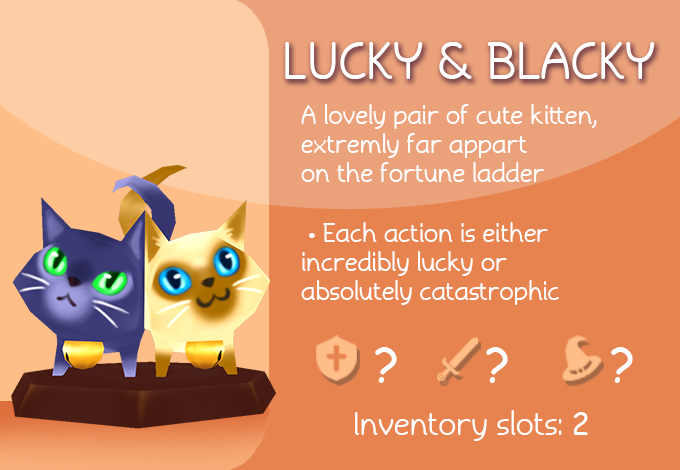
<style>
.page{position:relative;width:680px;height:470px;background:#e6834f}
.page>*{position:absolute;margin:0}
.t1{font:48px "Torid";color:#ffffff}
.t2{font:24px "Torid";color:#ffffff}
.t3{font:48px "ComicSansMS";color:#ffffff}
.t4{font:30px "Torid";color:#ffffff}
.t5{font:30px "ComicSansMS";color:#ffffff}
</style>
<div class="page">
<p class="t1" style="left:285px;top:42px;width:369px;height:37px">LUCKY &amp; BLACKY</p>
<p class="t2" style="left:301px;top:104px;width:296px;height:78px">A lovely pair of cute kitten, <br>extremly far appart <br>on the fortune ladder</p>
<p class="t2" style="left:301px;top:222px;width:258px;height:83px">• Each action is either <br>incredibly lucky or <br>absolutely catastrophic</p>
<p class="t3" style="left:375px;top:347px;width:258px;height:36px">?      ?       ?</p>
<p class="t4" style="left:355px;top:410px;width:234px;height:31px">Inventory slots: 2</p>
<p class="t4" style="left:355px;top:410px;width:233px;height:31px">Inventory slots: <span class="t5">2</span></p>
</div>
